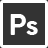
<style>
.page{position:relative;width:48px;height:48px;background:#333333}
.page>*{position:absolute;margin:0}
.t1{font:28px "CocoGothic-Bold";color:#ffffff}
</style>
<div class="page">
<p class="t1" style="left:10px;top:14px;width:28px;height:21px">Ps</p>
</div>
